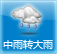
<style>
.page{position:relative;width:57px;height:54px}
.page>*{position:absolute;margin:0}
.t1{font:10px "MicrosoftYaHei";color:#ffffff}
</style>
<div class="page">
<p class="t1" style="left:3px;top:39px;width:50px;height:11px">中雨转大雨</p>
</div>
